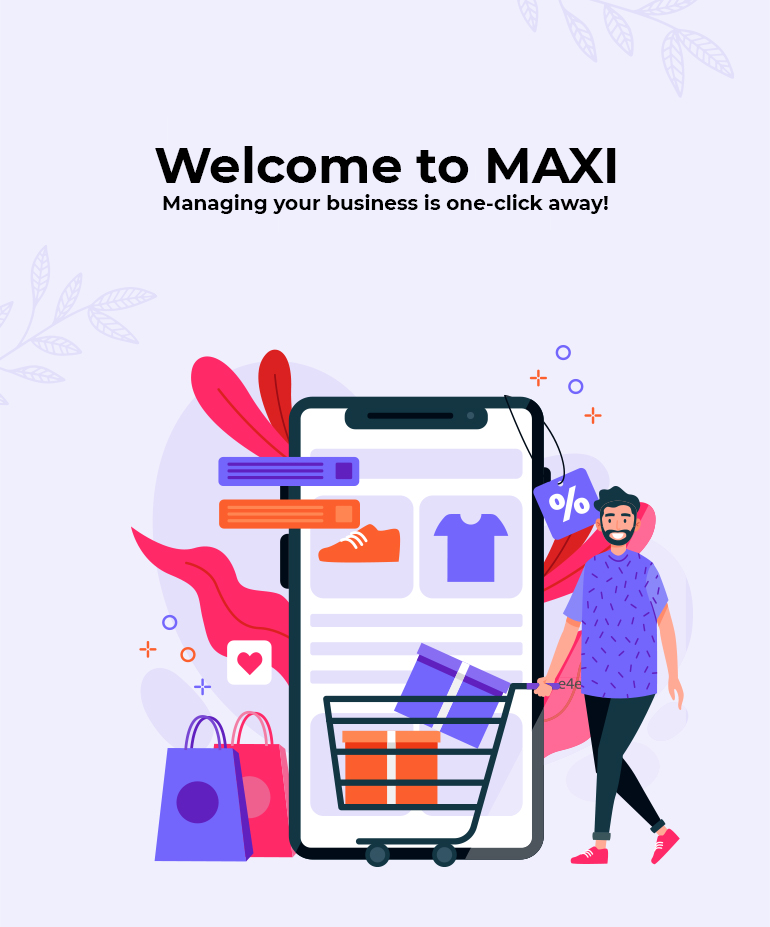
<style>
.page{position:relative;width:770px;height:927px;background:#f0effd}
.page>*{position:absolute;margin:0}
.t1{font:50px "Montserrat-Bold";color:#000000}
.t2{font:20px "Montserrat-Bold";color:#000000}
</style>
<div class="page">
<p class="t1" style="left:155px;top:146px;width:461px;height:37px">Welcome to MAXI</p>
<p class="t2" style="left:163px;top:194px;width:445px;height:20px">Managing your business is one-click away!</p>
</div>
